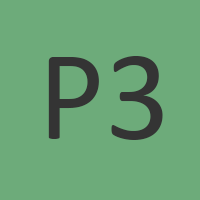
<style>
.page{position:relative;width:200px;height:200px;background:#6dab7a}
.page>*{position:absolute;margin:0}
.t1{font:129.3px "Calibri";color:#343434}
</style>
<div class="page">
<p class="t1" style="left:48px;top:56px;width:115px;height:84px">P3</p>
</div>
